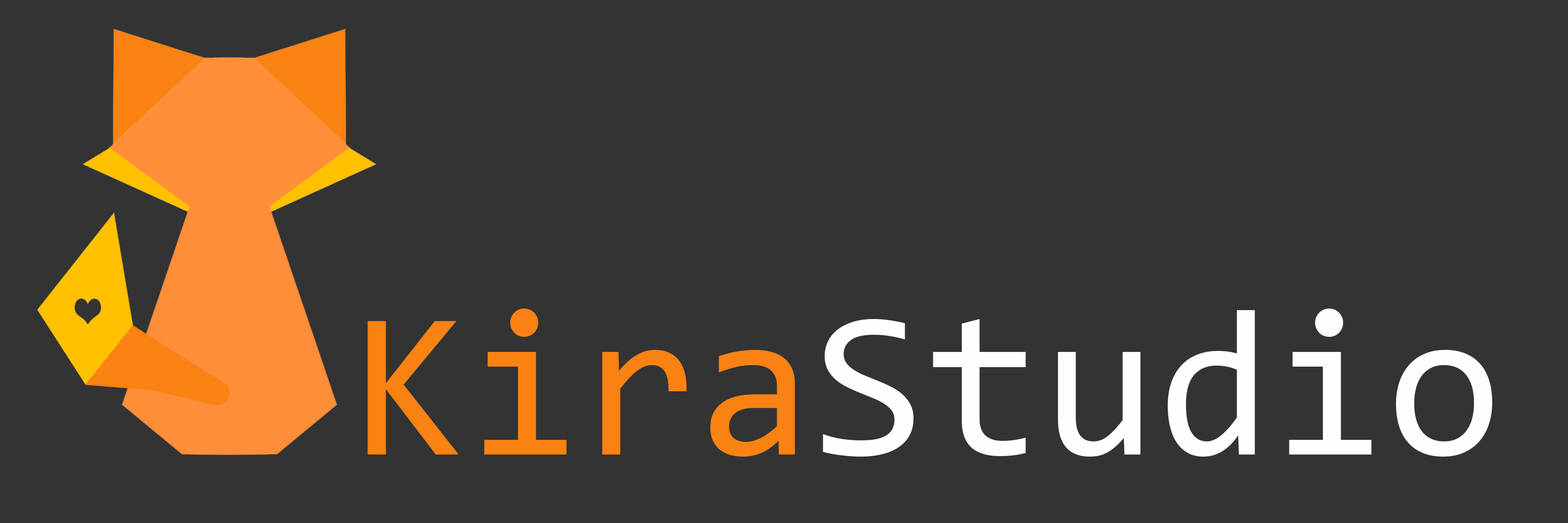
<style>
.page{position:relative;width:1568px;height:523px;background:#333333}
.page>*{position:absolute;margin:0}
.t1{font:209.1px "Consolas";color:#fefefe}
.t2{font:209.1px "Consolas";color:#fa8212}
</style>
<div class="page">
<p class="t1" style="left:367px;top:308px;width:1125px;height:148px"><span class="t2">Kira</span>Studio</p>
</div>
